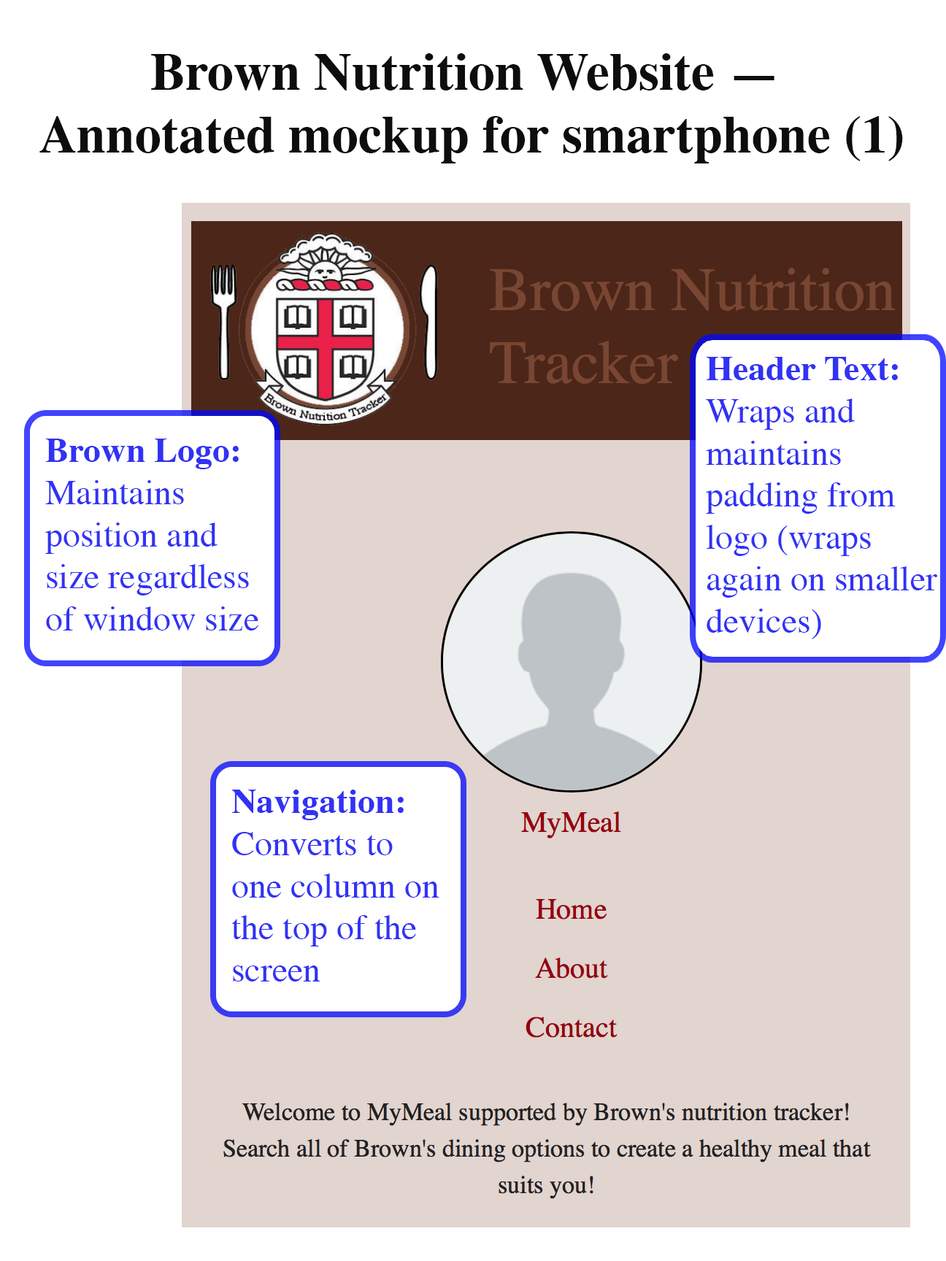
<style>
.page{position:relative;width:946px;height:1261px;background:#ffffff}
.page>*{position:absolute;margin:0}
.t1{font:52.5px "Times-Bold";color:#0d0d0d}
.t2{font:35px "Times-Roman";color:#3132f5}
.t3{font:35px "Times-Bold";color:#3132f5}
</style>
<div class="page">
<p class="t1" style="left:39px;top:53px;width:864px;height:110px;text-align:center">Brown Nutrition Website — <br>Annotated mockup for smartphone (1)</p>
<p class="t2" style="left:706px;top:357px;width:231px;height:282px"><span class="t3">Header Text: <br></span>Wraps and maintains padding from logo (wraps again on smaller devices)</p>
<p class="t2" style="left:45px;top:439px;width:213px;height:191px"><span class="t3">Brown Logo: <br></span>Maintains position and size regardless of window size</p>
<p class="t2" style="left:231px;top:790px;width:208px;height:191px"><span class="t3">Navigation: <br></span>Converts to one column on the top of the screen</p>
</div>
